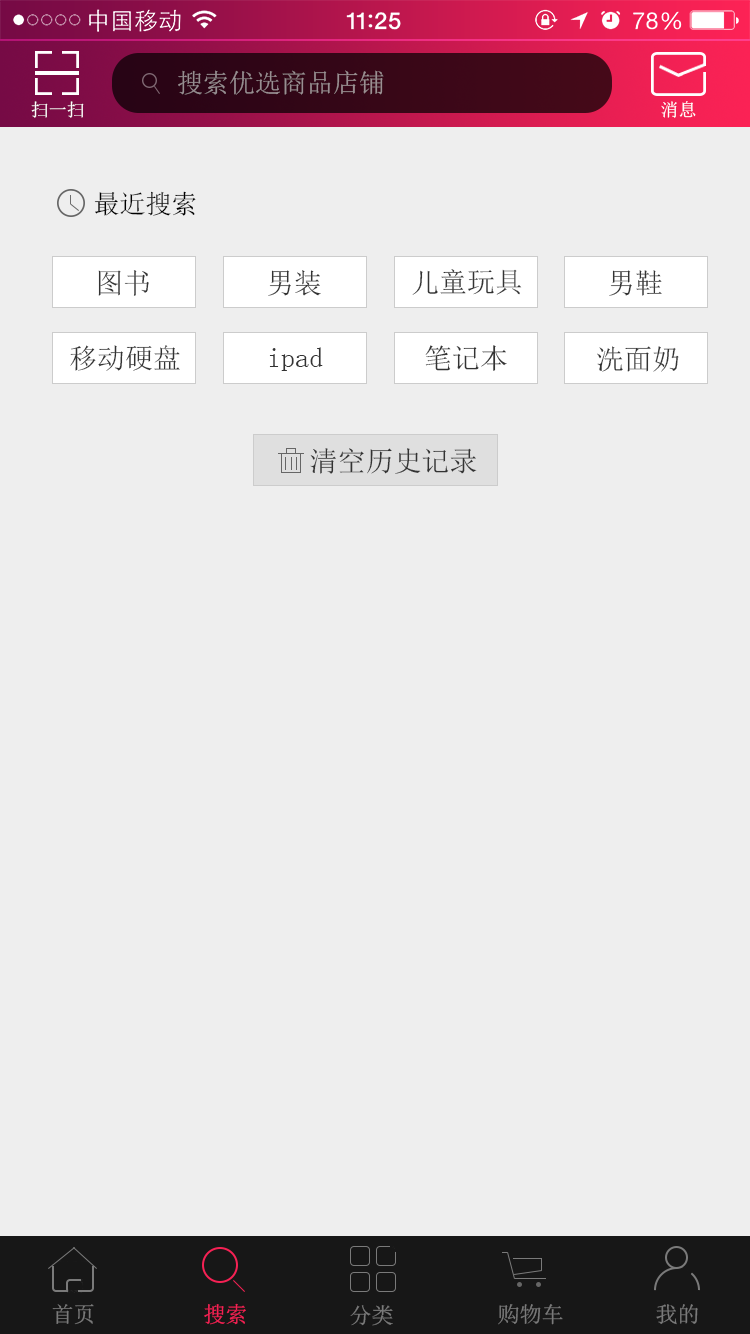
<style>
.page{position:relative;width:750px;height:1334px;background:#eeeeee}
.page>*{position:absolute;margin:0}
.t1{font:26px "SimSun";color:#998e92}
.t2{font:18px "SimSun";color:#ffffff}
.t3{font:26px "SimSun";color:#000000}
.t4{font:28px "SimSun";color:#333333}
.t5{font:22px "SimSun";color:#7a7a7a}
.t6{font:22px "SimSun";color:#f62154}
</style>
<div class="page">
<p class="t1" style="left:178px;top:70px;width:206px;height:25px">搜索优选商品店铺</p>
<p class="t2" style="left:31px;top:101px;width:53px;height:17px">扫一扫</p>
<p class="t2" style="left:661px;top:101px;width:35px;height:17px">消息</p>
<p class="t3" style="left:94px;top:191px;width:102px;height:25px">最近搜索</p>
<p class="t4" style="left:98px;top:270px;width:51px;height:26px">图书</p>
<p class="t4" style="left:268px;top:270px;width:53px;height:26px">男装</p>
<p class="t4" style="left:412px;top:269px;width:110px;height:26px">儿童玩具</p>
<p class="t4" style="left:609px;top:270px;width:53px;height:26px">男鞋</p>
<p class="t4" style="left:70px;top:345px;width:110px;height:26px">移动硬盘</p>
<p class="t4" style="left:269px;top:347px;width:54px;height:24px">ipad</p>
<p class="t4" style="left:425px;top:345px;width:82px;height:26px">笔记本</p>
<p class="t4" style="left:597px;top:346px;width:82px;height:26px">洗面奶</p>
<p class="t4" style="left:310px;top:448px;width:167px;height:26px">清空历史记录</p>
<p class="t5" style="left:52px;top:1304px;width:42px;height:21px">首页</p>
<p class="t6" style="left:204px;top:1303px;width:42px;height:22px">搜索</p>
<p class="t5" style="left:350px;top:1305px;width:43px;height:21px">分类</p>
<p class="t5" style="left:498px;top:1304px;width:65px;height:21px">购物车</p>
<p class="t5" style="left:656px;top:1304px;width:42px;height:21px">我的</p>
</div>
